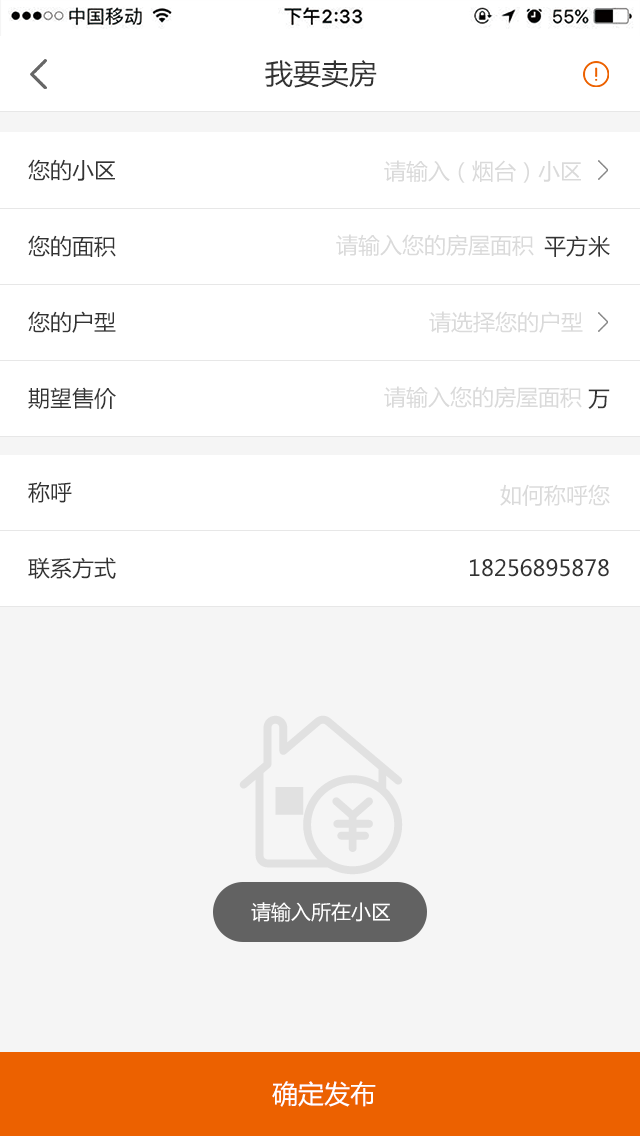
<style>
.page{position:relative;width:640px;height:1136px;background:#ffffff}
.page>*{position:absolute;margin:0}
.t1{font:28px "MicrosoftYaHei";color:#333333}
.t2{font:22px "MicrosoftYaHei";color:#333333}
.t3{font:22px "MicrosoftYaHei";color:#dadada}
.t4{font:20px "MicrosoftYaHei";color:#ffffff}
.t5{font:26px "MicrosoftYaHei";color:#ffffff}
</style>
<div class="page">
<p class="t1" style="left:265px;top:60px;width:112px;height:28px">我要卖房</p>
<p class="t2" style="left:28px;top:159px;width:87px;height:22px">您的小区</p>
<p class="t3" style="left:384px;top:160px;width:197px;height:23px">请输入（烟台）小区</p>
<p class="t2" style="left:28px;top:235px;width:88px;height:22px">您的面积</p>
<p class="t3" style="left:336px;top:234px;width:198px;height:22px">请输入您的房屋面积</p>
<p class="t2" style="left:544px;top:235px;width:66px;height:22px">平方米</p>
<p class="t2" style="left:28px;top:311px;width:88px;height:22px">您的户型</p>
<p class="t3" style="left:429px;top:311px;width:154px;height:22px">请选择您的户型</p>
<p class="t2" style="left:28px;top:387px;width:88px;height:23px">期望售价</p>
<p class="t3" style="left:384px;top:386px;width:198px;height:22px">请输入您的房屋面积</p>
<p class="t2" style="left:588px;top:389px;width:22px;height:20px">万</p>
<p class="t2" style="left:28px;top:481px;width:44px;height:22px">称呼</p>
<p class="t3" style="left:500px;top:484px;width:110px;height:22px">如何称呼您</p>
<p class="t2" style="left:28px;top:557px;width:88px;height:22px">联系方式</p>
<p class="t2" style="left:470px;top:559px;width:139px;height:18px">18256895878</p>
<p class="t4" style="left:251px;top:902px;width:139px;height:20px">请输入所在小区</p>
<p class="t5" style="left:272px;top:1081px;width:104px;height:26px">确定发布</p>
</div>
